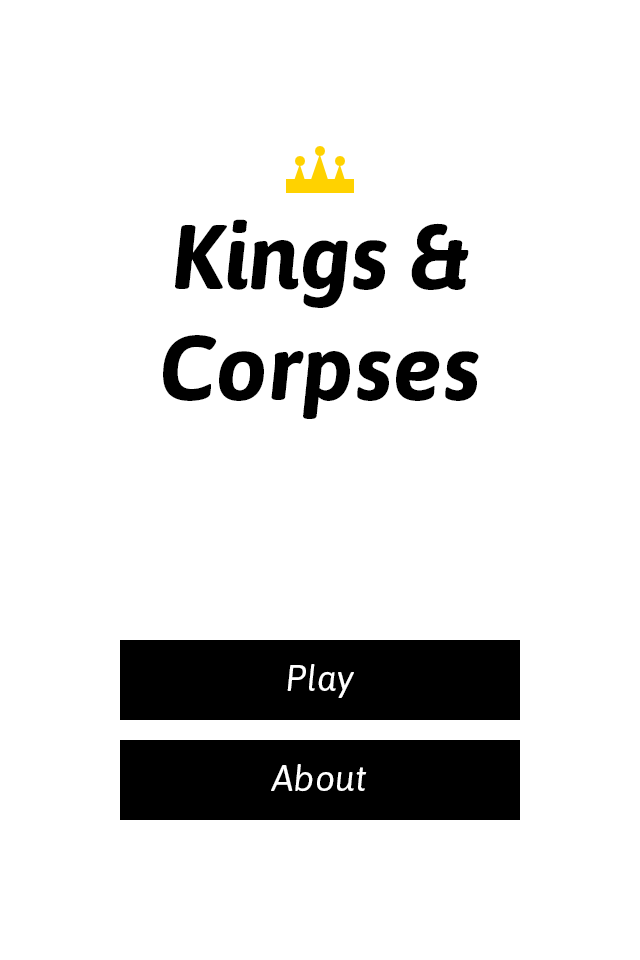
<style>
.page{position:relative;width:640px;height:960px;background:#ffffff}
.page>*{position:absolute;margin:0}
.t1{font:92px "Asap-BoldItalic";color:#000000}
.t2{font:36px "Asap-Italic";color:#ffffff}
</style>
<div class="page">
<p class="t1" style="left:163px;top:219px;width:316px;height:200px;text-align:center">Kings &amp;<br>Corpses</p>
<p class="t2" style="left:287px;top:664px;width:67px;height:34px">Play</p>
<p class="t2" style="left:271px;top:764px;width:96px;height:28px">About</p>
</div>
